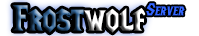
<style>
.page{position:relative;width:199px;height:36px;background:#ffffff}
.page>*{position:absolute;margin:0}
.t1{font:36px "LifeCraft"}
.t2{font:18px "LifeCraft";color:#3366ff;font-variant:small-caps;font-style:italic}
</style>
<div class="page">
<p class="t1" style="left:13px;top:5px;width:133px;height:28px">Frostwolf ServerF</p>
<p class="t2" style="left:146px;top:3px;width:39px;height:13px">Server</p>
</div>
